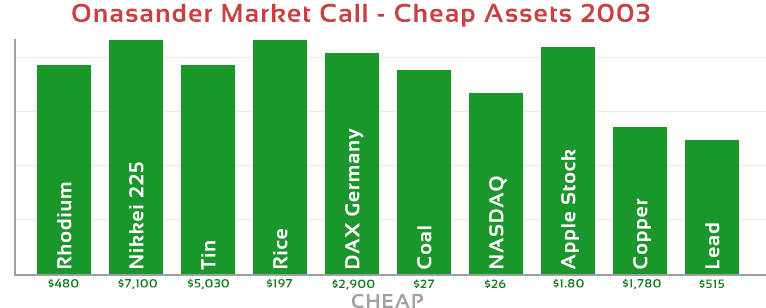
<style>
.page{position:relative;width:766px;height:308px;background:#1a972b}
.page>*{position:absolute;margin:0}
.t1{font:26px "Sansation-Bold";letter-spacing:0.05em;color:#c84040}
.t2{font:20px "Sansation-Bold";letter-spacing:0.05em;color:#ffffff}
.t3{font:12px "Sansation-Bold";letter-spacing:0.05em;color:#0a7e1a}
.t4{font:20px "Sansation-Bold";letter-spacing:0.05em;color:#9f9fa0}
</style>
<div class="page">
<p class="t1" style="left:72px;top:3px;width:578px;height:24px">Onasander Market Call - Cheap Assets 2003</p>
<p class="t2" style="left:345px;top:128px;width:19px;height:140px;rotate:-90deg">DAX Germany</p>
<p class="t2" style="left:561px;top:149px;width:18px;height:121px;rotate:-90deg">Apple Stock</p>
<p class="t2" style="left:129px;top:162px;width:15px;height:106px;rotate:-90deg">Nikkei 225</p>
<p class="t2" style="left:57px;top:182px;width:15px;height:86px;rotate:-90deg">Rhodium</p>
<p class="t2" style="left:489px;top:176px;width:19px;height:92px;rotate:-90deg">NASDAQ</p>
<p class="t2" style="left:633px;top:198px;width:18px;height:71px;rotate:-90deg">Copper</p>
<p class="t2" style="left:273px;top:229px;width:15px;height:39px;rotate:-90deg">Rice</p>
<p class="t2" style="left:417px;top:226px;width:15px;height:43px;rotate:-90deg">Coal</p>
<p class="t2" style="left:705px;top:223px;width:15px;height:45px;rotate:-90deg">Lead</p>
<p class="t2" style="left:201px;top:241px;width:15px;height:29px;rotate:-90deg">Tin</p>
<p class="t3" style="left:48px;top:279px;width:31px;height:9px">$480</p>
<p class="t3" style="left:118px;top:279px;width:39px;height:10px">$7,100</p>
<p class="t3" style="left:188px;top:279px;width:41px;height:10px">$5,030</p>
<p class="t3" style="left:267px;top:279px;width:25px;height:9px">$197</p>
<p class="t3" style="left:332px;top:279px;width:43px;height:11px">$2,900</p>
<p class="t3" style="left:414px;top:279px;width:20px;height:9px">$27</p>
<p class="t3" style="left:485px;top:279px;width:21px;height:9px">$26</p>
<p class="t3" style="left:553px;top:279px;width:31px;height:9px">$1.80</p>
<p class="t3" style="left:623px;top:279px;width:38px;height:10px">$1,780</p>
<p class="t3" style="left:699px;top:279px;width:25px;height:9px">$515</p>
<p class="t4" style="left:352px;top:294px;width:71px;height:14px">CHEAP</p>
</div>
